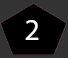
<style>
.page{position:relative;width:68px;height:58px;background:#000000}
.page>*{position:absolute;margin:0}
.t1{font:30px "MyriadPro-Regular";color:#ffffff}
</style>
<div class="page">
<p class="t1" style="left:25px;top:20px;width:14px;height:20px">2</p>
</div>
